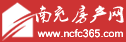
<style>
.page{position:relative;width:126px;height:42px;background:#cd3333}
.page>*{position:absolute;margin:0}
.t1{font:18px "2.0-";letter-spacing:0.01em;color:#ffffff}
.t2{font:10px "Kartika";letter-spacing:0.01em;color:#ffffff}
</style>
<div class="page">
<p class="t1" style="left:35px;top:5px;width:89px;height:19px">南充房产网</p>
<p class="t2" style="left:37px;top:29px;width:86px;height:9px">www.ncfc365.com</p>
</div>
